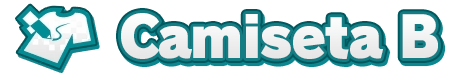
<style>
.page{position:relative;width:458px;height:76px;background:#ffffff}
.page>*{position:absolute;margin:0}
.t1{font:56px "RodinPro-UB";letter-spacing:-0.035em;color:#f0f0f0}
</style>
<div class="page">
<p class="t1" style="left:121px;top:13px;width:317px;height:46px">Camiseta B</p>
</div>
